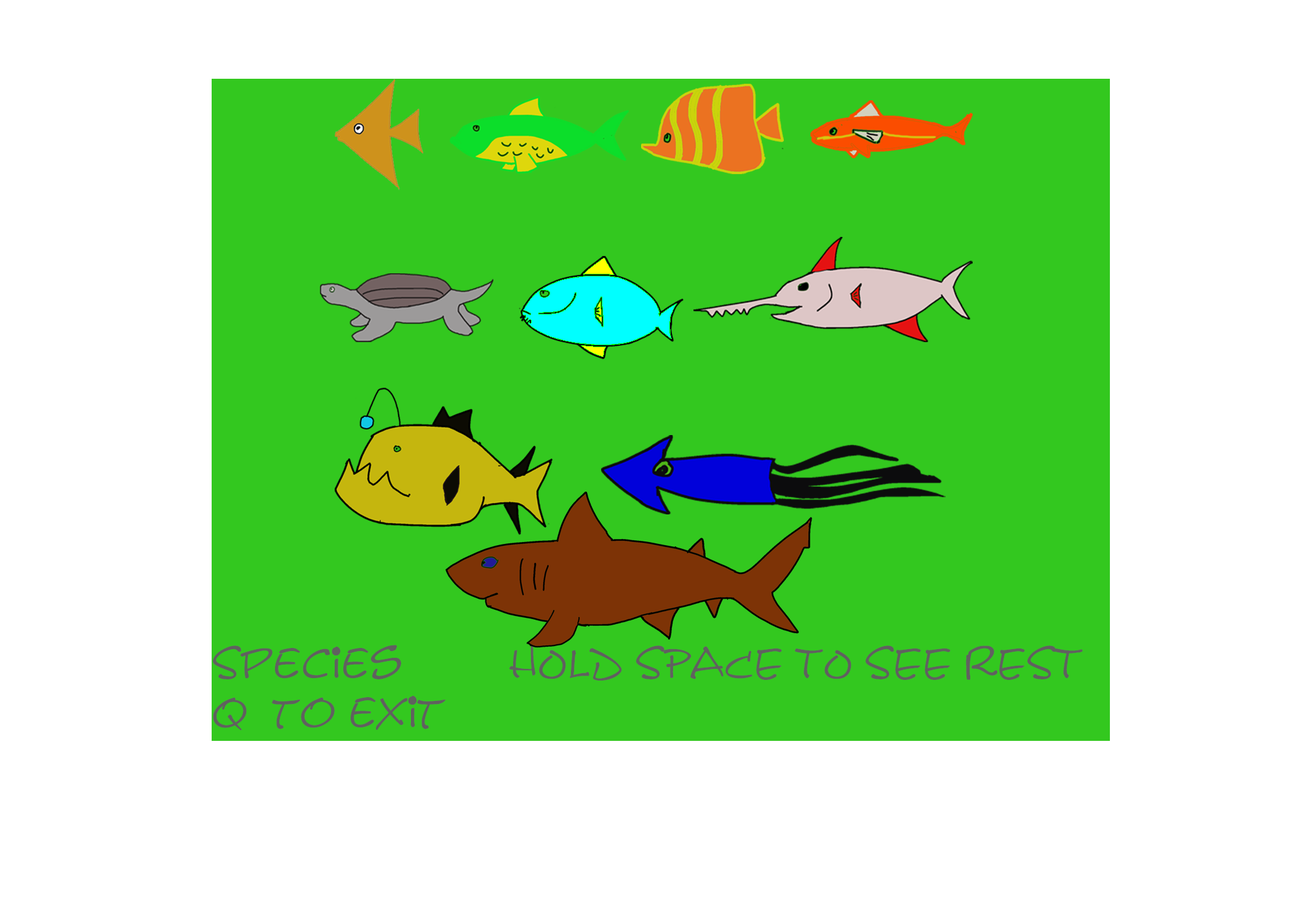
<style>
.page{position:relative;width:1292px;height:923px;background:#ffffff}
.page>*{position:absolute;margin:0}
.t1{font:41px "Calvin";color:#60615f}
</style>
<div class="page">
<p class="t1" style="left:212px;top:645px;width:871px;height:85px">Species         hOLD SPACE TO SEE REST                                                               q  to exit</p>
</div>
